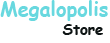
<style>
.page{position:relative;width:110px;height:43px;background:#ffffff}
.page>*{position:absolute;margin:0}
.t1{font:20px "ComicSansMS-Bold";color:#68d8df}
.t2{font:15px "ComicSansMS-Bold";color:#0e1414}
</style>
<div class="page">
<p class="t1" style="left:0px;top:0px;width:108px;height:21px">Megalopolis</p>
<p class="t2" style="left:62px;top:24px;width:41px;height:11px">Store</p>
</div>
